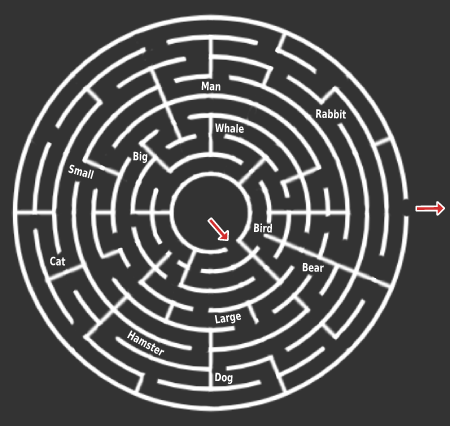
<style>
.page{position:relative;width:450px;height:426px;background:#333333}
.page>*{position:absolute;margin:0}
.t1{font:11.5px "DejaVuSans-Bold";color:#ffffff;scale:0.73 1}
.t2{font:11.3px "DejaVuSans-Bold";color:#ffffff;scale:0.73 1}
</style>
<div class="page">
<p class="t1" style="left:201px;top:81px;width:20px;height:10px;rotate:2deg">Man</p>
<p class="t1" style="left:316px;top:109px;width:30px;height:10px;rotate:2deg">Rabbit</p>
<p class="t1" style="left:215px;top:123px;width:29px;height:10px;rotate:2deg">Whale</p>
<p class="t1" style="left:133px;top:151px;width:15px;height:12px;rotate:2deg">Big</p>
<p class="t2" style="left:68px;top:164px;width:26px;height:15px;rotate:16deg">Small</p>
<p class="t1" style="left:254px;top:223px;width:18px;height:10px;rotate:2deg">Bird</p>
<p class="t1" style="left:50px;top:256px;width:16px;height:10px;rotate:2deg">Cat</p>
<p class="t1" style="left:302px;top:263px;width:22px;height:9px;rotate:2deg">Bear</p>
<p class="t1" style="left:214px;top:313px;width:27px;height:11px;rotate:-9deg">Large</p>
<p class="t1" style="left:127px;top:330px;width:38px;height:26px;rotate:29deg">Hamster</p>
<p class="t1" style="left:215px;top:372px;width:18px;height:12px;rotate:2deg">Dog</p>
</div>
